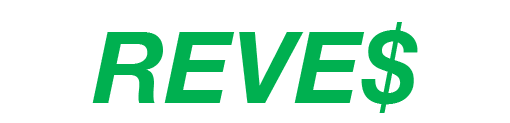
<style>
.page{position:relative;width:510px;height:123px;background:#ffffff}
.page>*{position:absolute;margin:0}
.t1{font:100px "HelveticaNeue-BoldItalic";color:#00b050}
</style>
<div class="page">
<p class="t1" style="left:92px;top:22px;width:326px;height:91px">REVE$</p>
<p class="t1" style="left:99px;top:32px;width:306px;height:71px">REVE-</p>
<p class="t1" style="left:99px;top:32px;width:306px;height:71px">REVE-</p>
</div>
